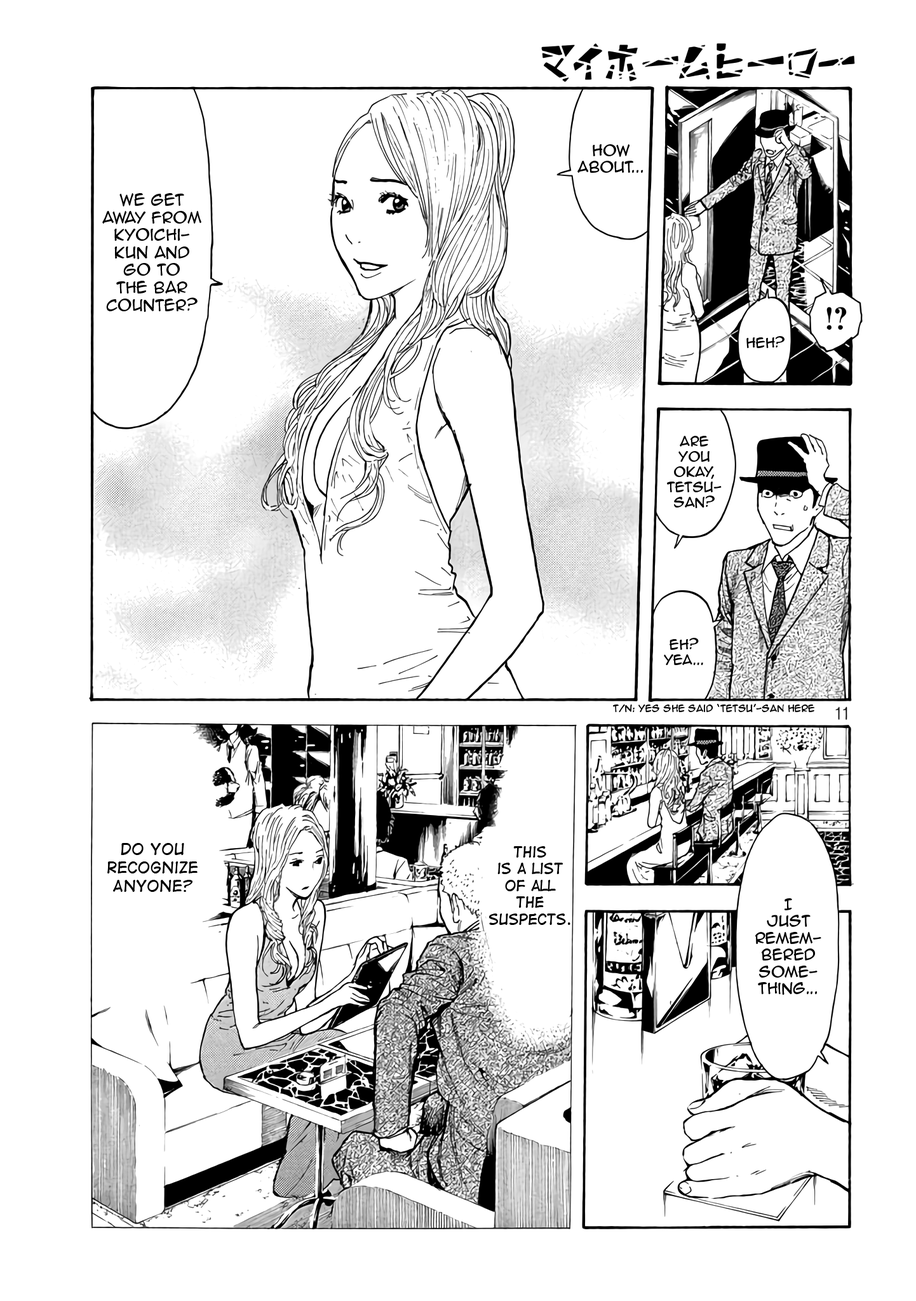
<style>
.page{position:relative;width:916px;height:1301px;background:#ffffff}
.page>*{position:absolute;margin:0}
.t1{font:14px "AnimeAce2.0BB";color:#000000}
.t2{font:14.6px "AnimeAce2.0BB";color:#000000}
.t3{font:12.7px "AnimeAce2.0BB";color:#000000}
.t4{font:8.9px "AnimeAce2.0BB";color:#000000}
.t5{font:15.3px "DigitalStrip";color:#000000}
.t6{font:14px "DigitalStrip";color:#000000}
</style>
<div class="page">
<p class="t1" style="left:578px;top:144px;width:66px;height:29px;text-align:center">How<br>About...</p>
<p class="t2" style="left:102px;top:193px;width:99px;height:119px;text-align:center">We get<br>away from<br>kyoichi-<br>kun and<br>go to<br>the bar<br>counter?</p>
<p class="t3" style="left:747px;top:336px;width:38px;height:12px">heh?</p>
<p class="t3" style="left:667px;top:436px;width:55px;height:72px;text-align:center">Are<br>you<br>okay,<br>Tetsu-<br>San?</p>
<p class="t3" style="left:664px;top:638px;width:39px;height:27px;text-align:center">EH?<br>Yea...</p>
<p class="t4" style="left:613px;top:704px;width:202px;height:8px">T/N: Yes she said ‘tetsu’-san here</p>
<p class="t5" style="left:107px;top:843px;width:91px;height:49px;text-align:center">DO you<br>recognize<br>Anyone?</p>
<p class="t6" style="left:489px;top:846px;width:82px;height:79px;text-align:center">This<br>is a list<br>of all<br>the<br>suspects.</p>
<p class="t1" style="left:756px;top:899px;width:66px;height:96px;text-align:center">I<br>just<br>remem-<br>bered<br>some-<br>thing...</p>
</div>
